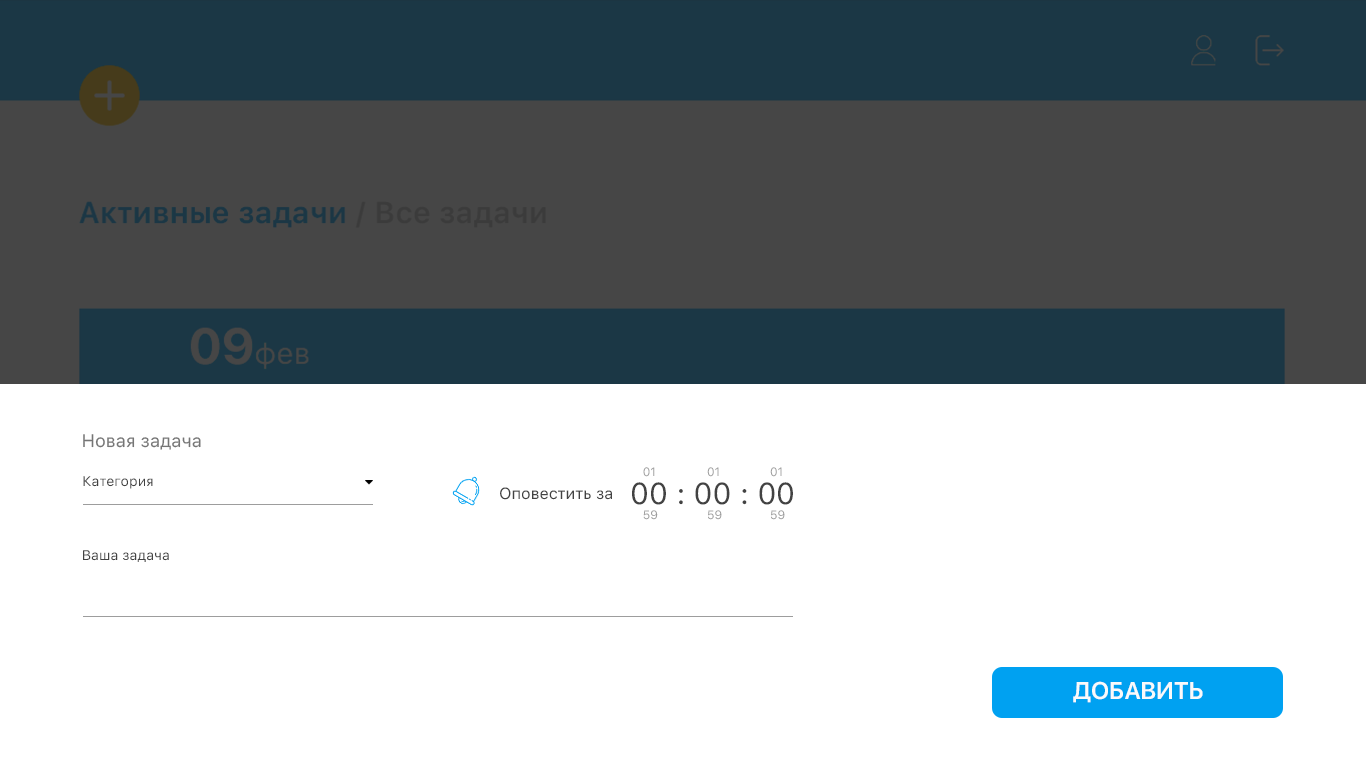
<style>
.page{position:relative;width:1366px;height:768px;background:#ffffff}
.page>*{position:absolute;margin:0}
.t1{font:18px "SFUIText-Regular";color:#757575}
.t2{font:12px "SFUIText-Regular";color:#9e9e9e}
.t3{font:14px "SFUIText-Regular";color:#424242}
.t4{font:30px "SFUIText-Regular";color:#424242}
.t5{font:16px "SFUIText-Regular";color:#424242}
.t6{font:24px "SFUIDisplay-Semibold";color:#fafafa}
</style>
<div class="page">
<p class="t1" style="left:83px;top:434px;width:118px;height:16px">Новая задача</p>
<p class="t2" style="left:643px;top:467px;width:12px;height:10px">01</p>
<p class="t2" style="left:707px;top:467px;width:12px;height:10px">01</p>
<p class="t2" style="left:770px;top:467px;width:12px;height:10px">01</p>
<p class="t3" style="left:83px;top:476px;width:70px;height:13px">Категория</p>
<p class="t4" style="left:632px;top:482px;width:161px;height:23px">00 : 00 : 00</p>
<p class="t5" style="left:500px;top:487px;width:112px;height:13px">Оповестить за</p>
<p class="t2" style="left:643px;top:510px;width:15px;height:10px">59</p>
<p class="t2" style="left:708px;top:510px;width:14px;height:10px">59</p>
<p class="t2" style="left:771px;top:510px;width:14px;height:10px">59</p>
<p class="t3" style="left:83px;top:550px;width:86px;height:12px">Ваша задача</p>
<p class="t6" style="left:1073px;top:681px;width:130px;height:22px">ДОБАВИТЬ</p>
</div>
